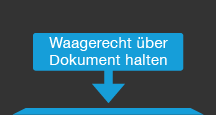
<style>
.page{position:relative;width:216px;height:115px;background:#333333}
.page>*{position:absolute;margin:0}
.t1{font:14.8px/17.6px "HelveticaNeue";letter-spacing:0.025em;color:#ffffff}
</style>
<div class="page">
<p class="t1" style="left:49px;top:37px;width:119px;height:28px;text-align:center">Waagerecht über<br>Dokument halten</p>
</div>
